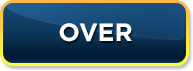
<style>
.page{position:relative;width:193px;height:71px}
.page>*{position:absolute;margin:0}
.t1{font:25px "Gotham-Bold";color:#ffffff;text-transform:uppercase}
</style>
<div class="page">
<p class="t1" style="left:59px;top:23px;width:73px;height:19px">OVER</p>
</div>
